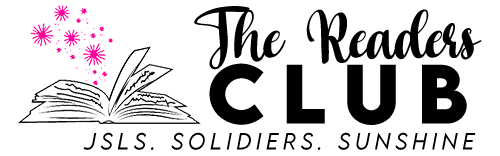
<style>
.page{position:relative;width:500px;height:156px;background:#ffffff}
.page>*{position:absolute;margin:0}
.t1{font:67.1px "welove";color:#000000}
.t2{font:74.6px "LEMONMILK-Bold";letter-spacing:0.22em;color:#000000}
.t3{font:20.9px "LEMONMILK-LightItalic";letter-spacing:0.22em;color:#000000}
</style>
<div class="page">
<p class="t1" style="left:194px;top:6px;width:288px;height:64px">The Readers</p>
<p class="t2" style="left:209px;top:63px;width:258px;height:62px">CLUB</p>
<p class="t3" style="left:83px;top:132px;width:393px;height:18px">JSLS. SOLIDIERS. SUNSHINE</p>
</div>
